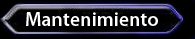
<style>
.page{position:relative;width:195px;height:39px;background:#000000}
.page>*{position:absolute;margin:0}
.t1{font:20px "MyriadPro-Semibold";color:#ffffff}
</style>
<div class="page">
<p class="t1" style="left:26px;top:12px;width:132px;height:14px">Mantenimiento</p>
</div>
